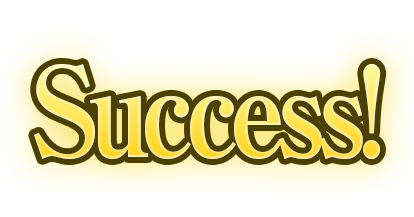
<style>
.page{position:relative;width:414px;height:217px;background:#ffffff}
.page>*{position:absolute;margin:0}
.t1{font:125px "RyuminPro-ExBold";letter-spacing:-0.08em;scale:0.9 1}
</style>
<div class="page">
<p class="t1" style="left:34px;top:64px;width:347px;height:96px">Success!</p>
</div>
